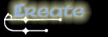
<style>
.page{position:relative;width:108px;height:37px;background:#000000}
.page>*{position:absolute;margin:0}
.t1{font:18px "Celtic-Normal";color:#94b2da}
.t2{font:18px "CathedralExtendedNormal";color:#94b2da}
</style>
<div class="page">
<p class="t1" style="left:13px;top:3px;width:72px;height:15px"><span class="t2">C</span>reate</p>
</div>
